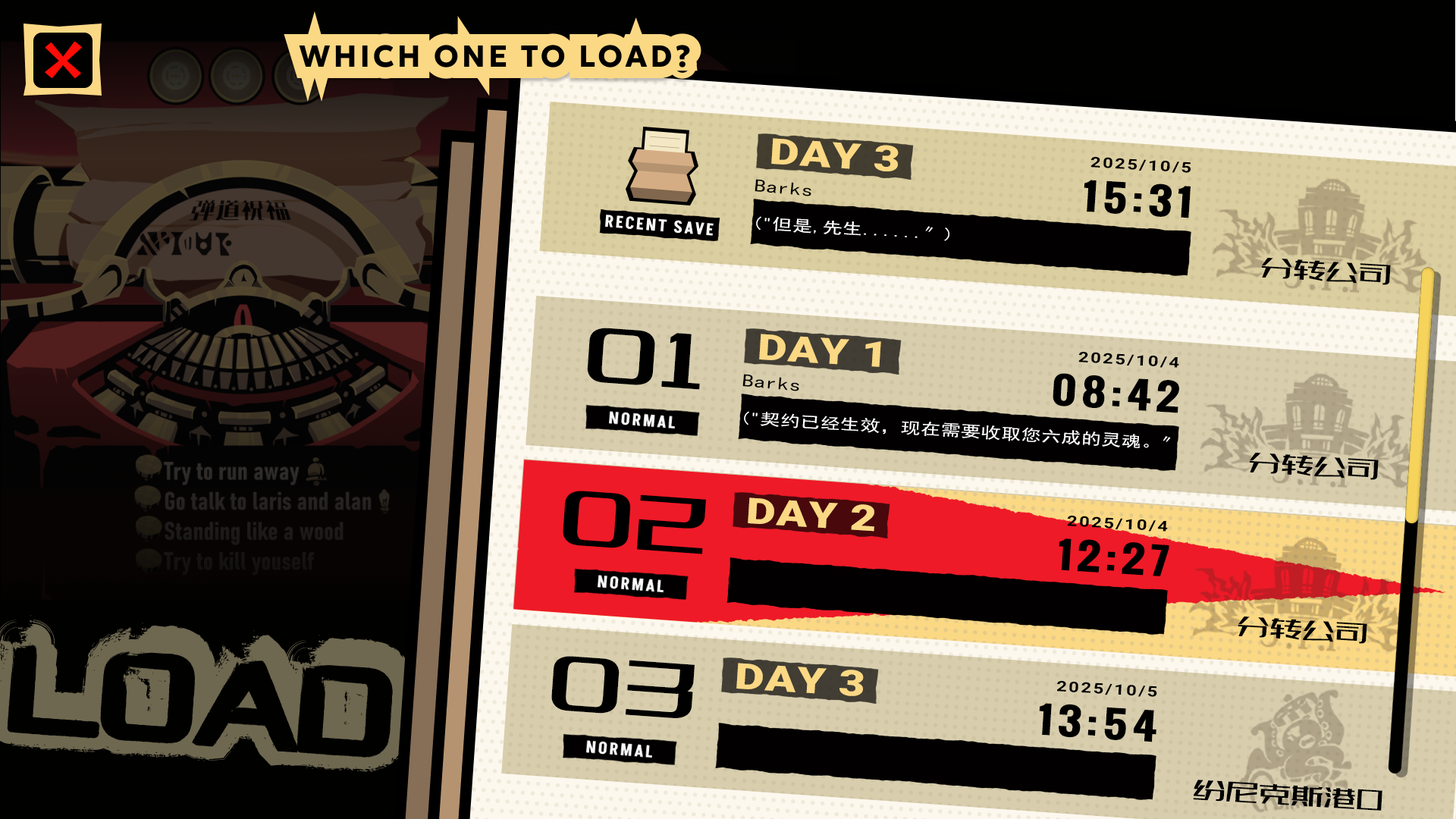
<style>
.page{position:relative;width:1456px;height:819px}
.page>*{position:absolute;margin:0}
.t1{font:35.9px "Roboto-Black";letter-spacing:0.02em;color:#fbd884;scale:1.27 1}
.t2{font:14.4px "Roboto-Bold";letter-spacing:0.1em;color:#000000;scale:1.27 1}
.t3{font:18px "SimHei";letter-spacing:0.02em;color:#000000;scale:1.27 1}
.t4{font:35.9px "Oswald-Bold";letter-spacing:0.1em;color:#000000;scale:1.27 1}
.t5{font:15.6px "SimHei";letter-spacing:0.02em;color:#ffffff;scale:1.27 1}
.t6{font:28.8px "007-SSJingDongTi";letter-spacing:0.02em;color:#000000;scale:1.27 1}
.t7{font:101.8px "007-SSJingDongTi";letter-spacing:0.02em;color:#000000;scale:1.27 1}
</style>
<div class="page">
<p class="t1" style="left:771px;top:138px;width:128px;height:33px;rotate:4deg">DAY 3</p>
<p class="t2" style="left:1090px;top:156px;width:101px;height:17px;rotate:3deg">2025/10/5</p>
<p class="t3" style="left:755px;top:179px;width:56px;height:17px;rotate:5deg">Barks</p>
<p class="t4" style="left:1084px;top:180px;width:107px;height:38px;rotate:4deg">15:31</p>
<p class="t5" style="left:756px;top:216px;width:193px;height:25px;rotate:3deg">("但是,先生......〞)</p>
<p class="t6" style="left:1261px;top:258px;width:130px;height:27px;rotate:3deg">分转公司</p>
<p class="t7" style="left:587px;top:328px;width:113px;height:62px;rotate:4deg">01</p>
<p class="t1" style="left:759px;top:334px;width:122px;height:33px;rotate:4deg">DAY 1</p>
<p class="t2" style="left:1078px;top:351px;width:101px;height:17px;rotate:3deg">2025/10/4</p>
<p class="t3" style="left:742px;top:374px;width:57px;height:17px;rotate:5deg">Barks</p>
<p class="t4" style="left:1053px;top:373px;width:126px;height:40px;rotate:4deg">08:42</p>
<p class="t5" style="left:744px;top:411px;width:427px;height:37px;rotate:3deg">("契约已经生效，现在需要收取您六成的灵魂。〞</p>
<p class="t6" style="left:1249px;top:453px;width:130px;height:27px;rotate:3deg">分转公司</p>
<p class="t7" style="left:563px;top:491px;width:143px;height:63px;rotate:4deg">02</p>
<p class="t1" style="left:748px;top:497px;width:126px;height:35px;rotate:4deg">DAY 2</p>
<p class="t2" style="left:1067px;top:515px;width:101px;height:17px;rotate:3deg">2025/10/4</p>
<p class="t4" style="left:1059px;top:538px;width:110px;height:38px;rotate:4deg">12:27</p>
<p class="t6" style="left:1238px;top:617px;width:129px;height:27px;rotate:3deg">分转公司</p>
<p class="t7" style="left:551px;top:656px;width:144px;height:62px;rotate:4deg">03</p>
<p class="t1" style="left:736px;top:663px;width:128px;height:33px;rotate:4deg">DAY 3</p>
<p class="t2" style="left:1057px;top:680px;width:100px;height:17px;rotate:3deg">2025/10/5</p>
<p class="t4" style="left:1039px;top:703px;width:117px;height:39px;rotate:4deg">13:54</p>
<p class="t6" style="left:1193px;top:780px;width:189px;height:31px;rotate:3deg">纷尼克斯港口</p>
</div>
